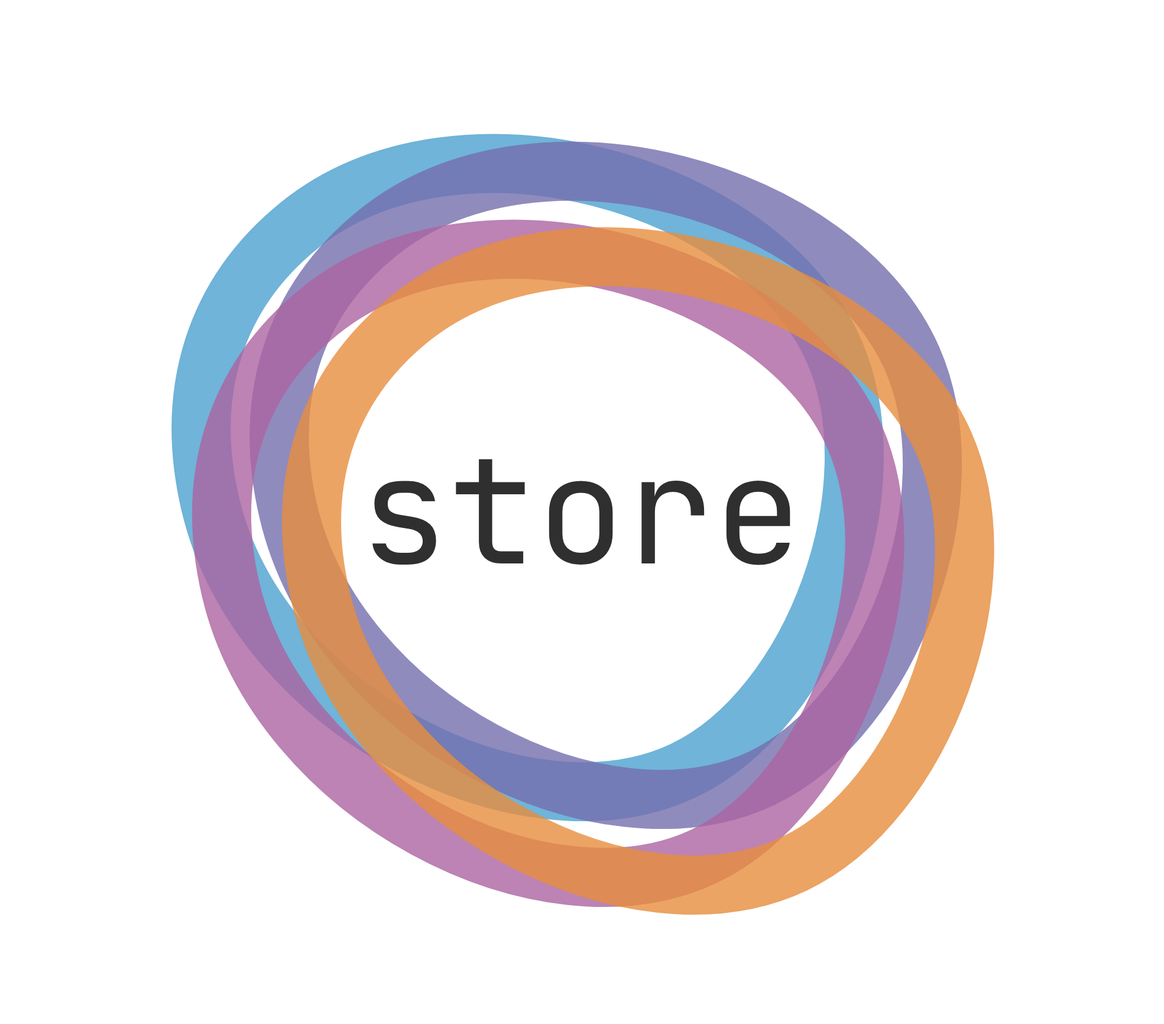
<style>
.page{position:relative;width:1164px;height:1024px;background:#ffffff}
.page>*{position:absolute;margin:0}
.t1{font:147.8px "JetBrainsMono-Regular";color:#2f2f2f}
</style>
<div class="page">
<p class="t1" style="left:373px;top:459px;width:418px;height:106px">store</p>
</div>
